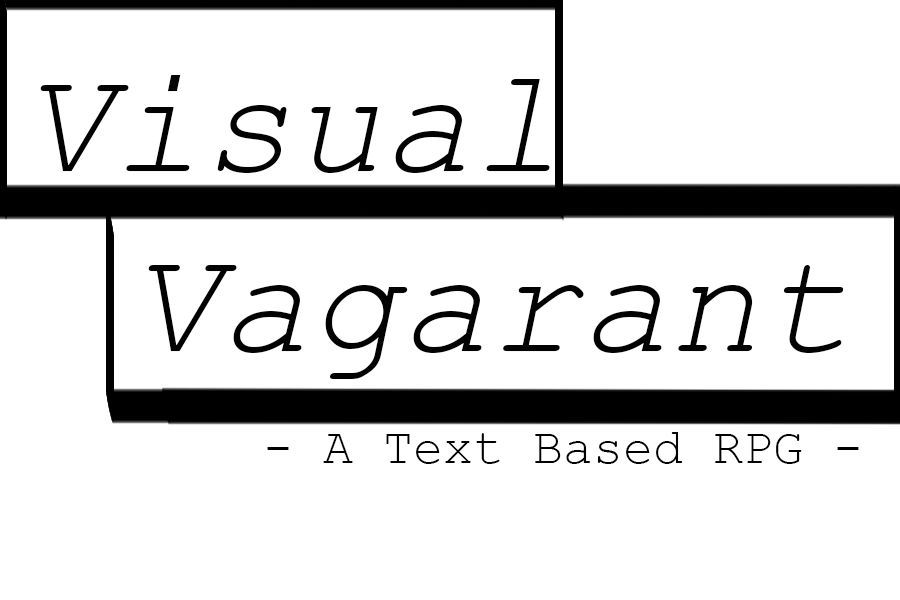
<style>
.page{position:relative;width:900px;height:600px;background:#ffffff}
.page>*{position:absolute;margin:0}
.t1{font:150px "CourierNewPS-ItalicMT";color:#020202}
.t2{font:50px "CourierNewPSMT";color:#000000}
</style>
<div class="page">
<p class="t1" style="left:40px;top:75px;width:804px;height:304px">Visual<br>   Vagarant</p>
<p class="t2" style="left:267px;top:432px;width:592px;height:32px">- A Text Based RPG -</p>
</div>
